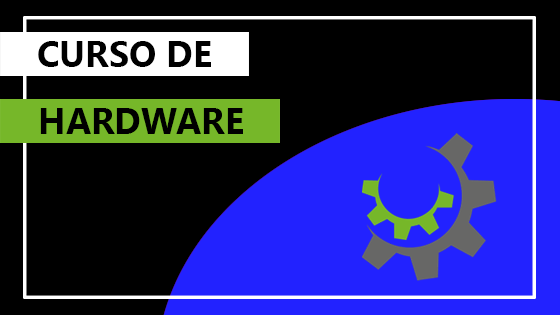
<style>
.page{position:relative;width:560px;height:315px;background:#000000}
.page>*{position:absolute;margin:0}
.t1{font:36px "SegoeUI-Bold";color:#000000}
</style>
<div class="page">
<p class="t1" style="left:38px;top:41px;width:173px;height:26px">CURSO DE</p>
<p class="t1" style="left:40px;top:108px;width:203px;height:26px">HARDWARE</p>
</div>
